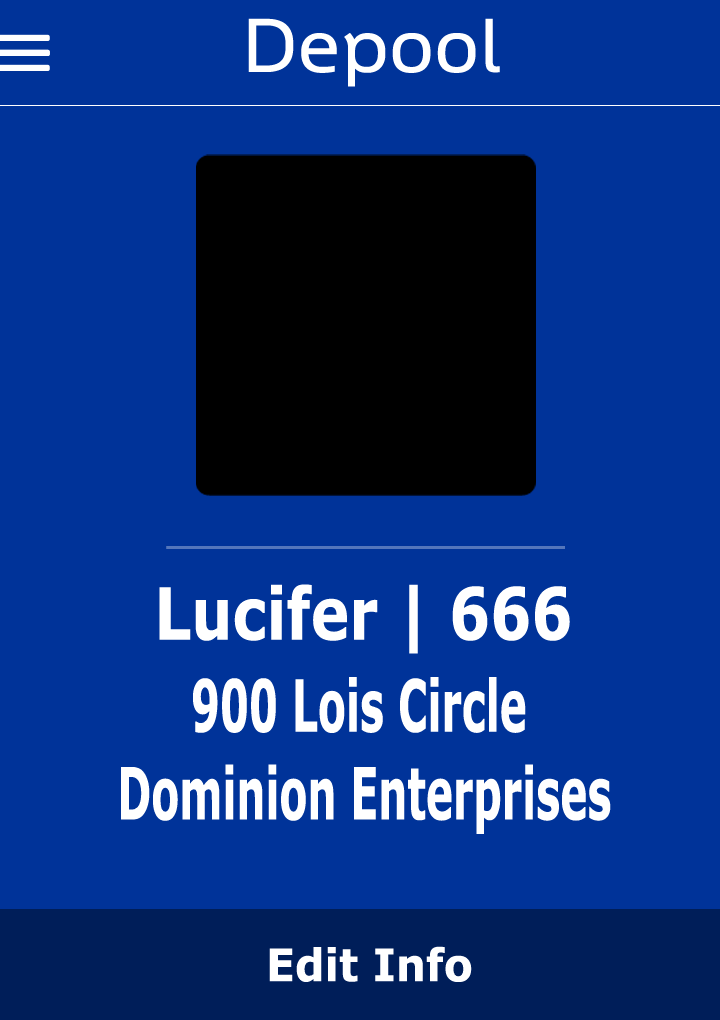
<style>
.page{position:relative;width:720px;height:1020px;background:#003399}
.page>*{position:absolute;margin:0}
.t1{font:72px "WascoSans";color:#ffffff;scale:1.09 1}
.t2{font:72px "Verdana-Bold";color:#ffffff;scale:0.8 1}
.t3{font:72px "Verdana-Bold";color:#ffffff;scale:0.57 1}
.t4{font:45px "Verdana-Bold";color:#ffffff;scale:0.94 1}
</style>
<div class="page">
<p class="t1" style="left:248px;top:18px;width:252px;height:69px">Depool</p>
<p class="t2" style="left:159px;top:584px;width:411px;height:70px">Lucifer | 666</p>
<p class="t3" style="left:193px;top:677px;width:333px;height:56px">900 Lois Circle</p>
<p class="t3" style="left:121px;top:764px;width:490px;height:70px">Dominion Enterprises</p>
<p class="t4" style="left:269px;top:946px;width:203px;height:36px">Edit Info</p>
</div>
